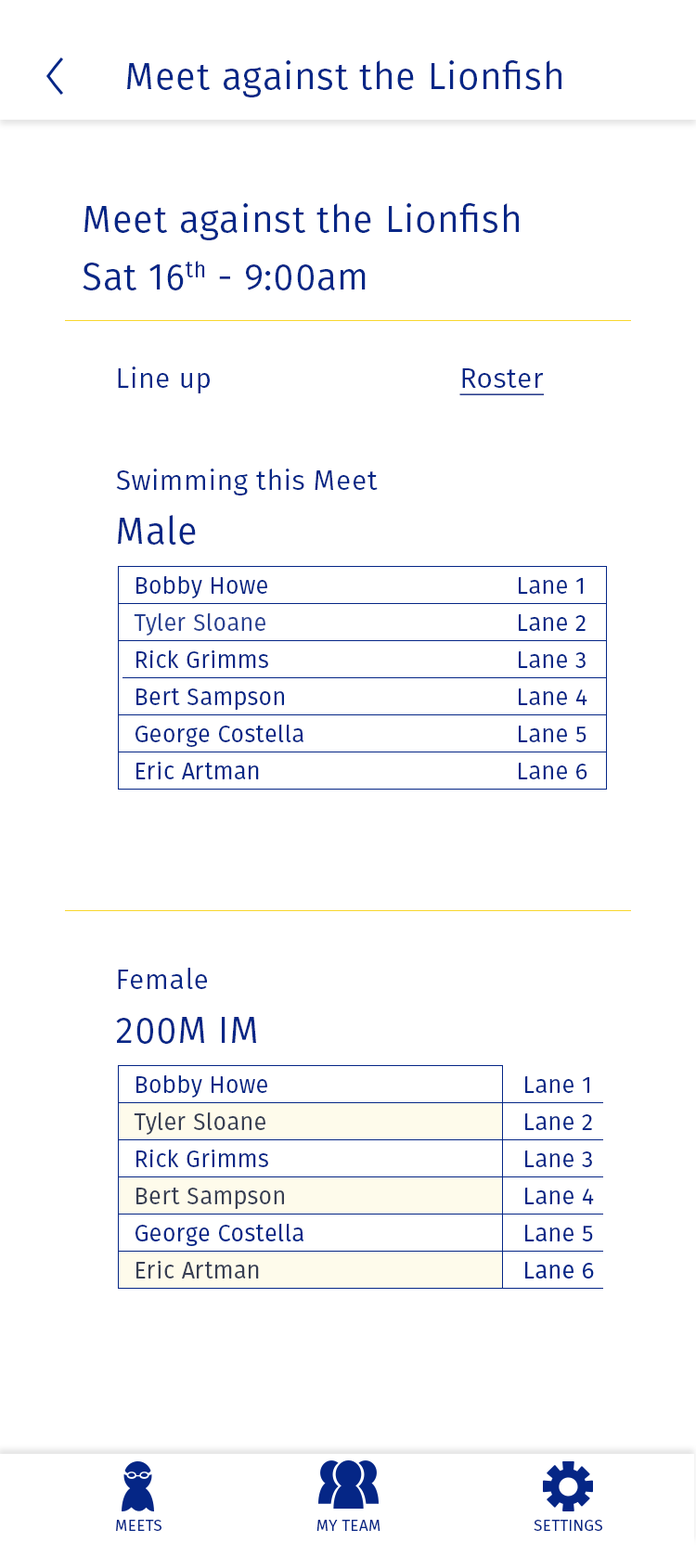
<style>
.page{position:relative;width:696px;height:1568px;background:#ffffff}
.page>*{position:absolute;margin:0}
.t1{font:37.1px "FiraSans-Book";letter-spacing:0.02em;color:#052686}
.t2{font:27.8px "FiraSans-Book";letter-spacing:0.02em;color:#052686}
.t3{font:27.8px "FiraSans-Book";letter-spacing:0.02em;color:#052686;text-decoration:underline}
.t4{font:23.2px "FiraSans-Book";letter-spacing:0.02em;color:#052686}
.t5{font:23.2px "FiraSans-Book";letter-spacing:0.02em;color:#284192}
.t6{font:23.2px "FiraSans-Book";letter-spacing:0.02em;color:#373e53}
.t7{font:15.8px "FiraSans-Book";letter-spacing:0.02em;color:#052686;text-transform:uppercase}
</style>
<div class="page">
<p class="t1" style="left:127px;top:60px;width:434px;height:37px">Meet against the Lionfish</p>
<p class="t1" style="left:84px;top:203px;width:435px;height:37px">Meet against the Lionfish</p>
<p class="t1" style="left:83px;top:261px;width:283px;height:29px">Sat 16th - 9:00am</p>
<p class="t2" style="left:118px;top:366px;width:92px;height:27px">Line up</p>
<p class="t3" style="left:459px;top:368px;width:86px;height:27px">Roster</p>
<p class="t2" style="left:116px;top:469px;width:262px;height:26px">Swimming this Meet</p>
<p class="t1" style="left:118px;top:515px;width:78px;height:30px">Male</p>
<p class="t4" style="left:136px;top:576px;width:131px;height:22px">Bobby Howe</p>
<p class="t4" style="left:519px;top:577px;width:64px;height:17px">Lane 1</p>
<p class="t5" style="left:134px;top:613px;width:131px;height:23px">Tyler Sloane</p>
<p class="t4" style="left:519px;top:614px;width:66px;height:17px">Lane 2</p>
<p class="t4" style="left:136px;top:649px;width:132px;height:19px">Rick Grimms</p>
<p class="t4" style="left:519px;top:651px;width:66px;height:17px">Lane 3</p>
<p class="t4" style="left:136px;top:688px;width:148px;height:22px">Bert Sampson</p>
<p class="t4" style="left:519px;top:688px;width:68px;height:17px">Lane 4</p>
<p class="t4" style="left:135px;top:725px;width:168px;height:22px">George Costella</p>
<p class="t4" style="left:519px;top:726px;width:67px;height:16px">Lane 5</p>
<p class="t4" style="left:136px;top:761px;width:123px;height:18px">Eric Artman</p>
<p class="t4" style="left:519px;top:763px;width:68px;height:16px">Lane 6</p>
<p class="t2" style="left:118px;top:968px;width:89px;height:21px">Female</p>
<p class="t1" style="left:116px;top:1017px;width:140px;height:27px">200M IM</p>
<p class="t4" style="left:136px;top:1075px;width:131px;height:23px">Bobby Howe</p>
<p class="t4" style="left:525px;top:1076px;width:64px;height:17px">Lane 1</p>
<p class="t6" style="left:134px;top:1112px;width:131px;height:23px">Tyler Sloane</p>
<p class="t4" style="left:525px;top:1113px;width:67px;height:17px">Lane 2</p>
<p class="t4" style="left:136px;top:1149px;width:132px;height:18px">Rick Grimms</p>
<p class="t4" style="left:525px;top:1150px;width:67px;height:17px">Lane 3</p>
<p class="t6" style="left:136px;top:1187px;width:148px;height:22px">Bert Sampson</p>
<p class="t4" style="left:525px;top:1188px;width:69px;height:16px">Lane 4</p>
<p class="t4" style="left:135px;top:1224px;width:168px;height:22px">George Costella</p>
<p class="t4" style="left:525px;top:1225px;width:68px;height:16px">Lane 5</p>
<p class="t6" style="left:136px;top:1260px;width:123px;height:19px">Eric Artman</p>
<p class="t4" style="left:525px;top:1262px;width:69px;height:17px">Lane 6</p>
<p class="t7" style="left:116px;top:1520px;width:45px;height:11px">Meets</p>
<p class="t7" style="left:316px;top:1520px;width:64px;height:11px">My Team</p>
<p class="t7" style="left:533px;top:1520px;width:69px;height:11px">Settings</p>
</div>
